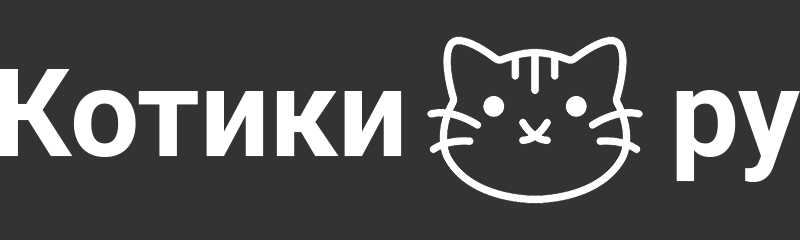
<style>
.page{position:relative;width:800px;height:240px;background:#333333}
.page>*{position:absolute;margin:0}
.t1{font:122.7px "Roboto-Bold";color:#ffffff}
</style>
<div class="page">
<p class="t1" style="left:0px;top:69px;width:402px;height:88px">Котики</p>
<p class="t1" style="left:676px;top:90px;width:124px;height:92px">ру</p>
</div>
